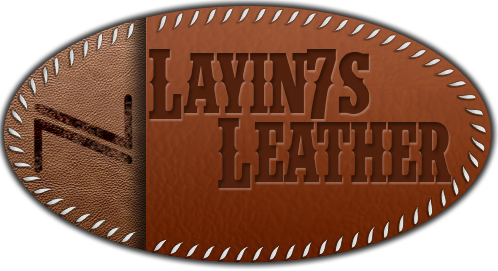
<style>
.page{position:relative;width:498px;height:271px}
.page>*{position:absolute;margin:0}
.t1{font:119.6px "IFCINSANERODEO";color:#51200d}
.t2{font:119.6px "IFCINSANERODEO";color:#50200d}
</style>
<div class="page">
<p class="t1" style="left:149px;top:49px;width:221px;height:70px">Layin7s</p>
<p class="t2" style="left:218px;top:118px;width:234px;height:70px">Leather</p>
</div>
